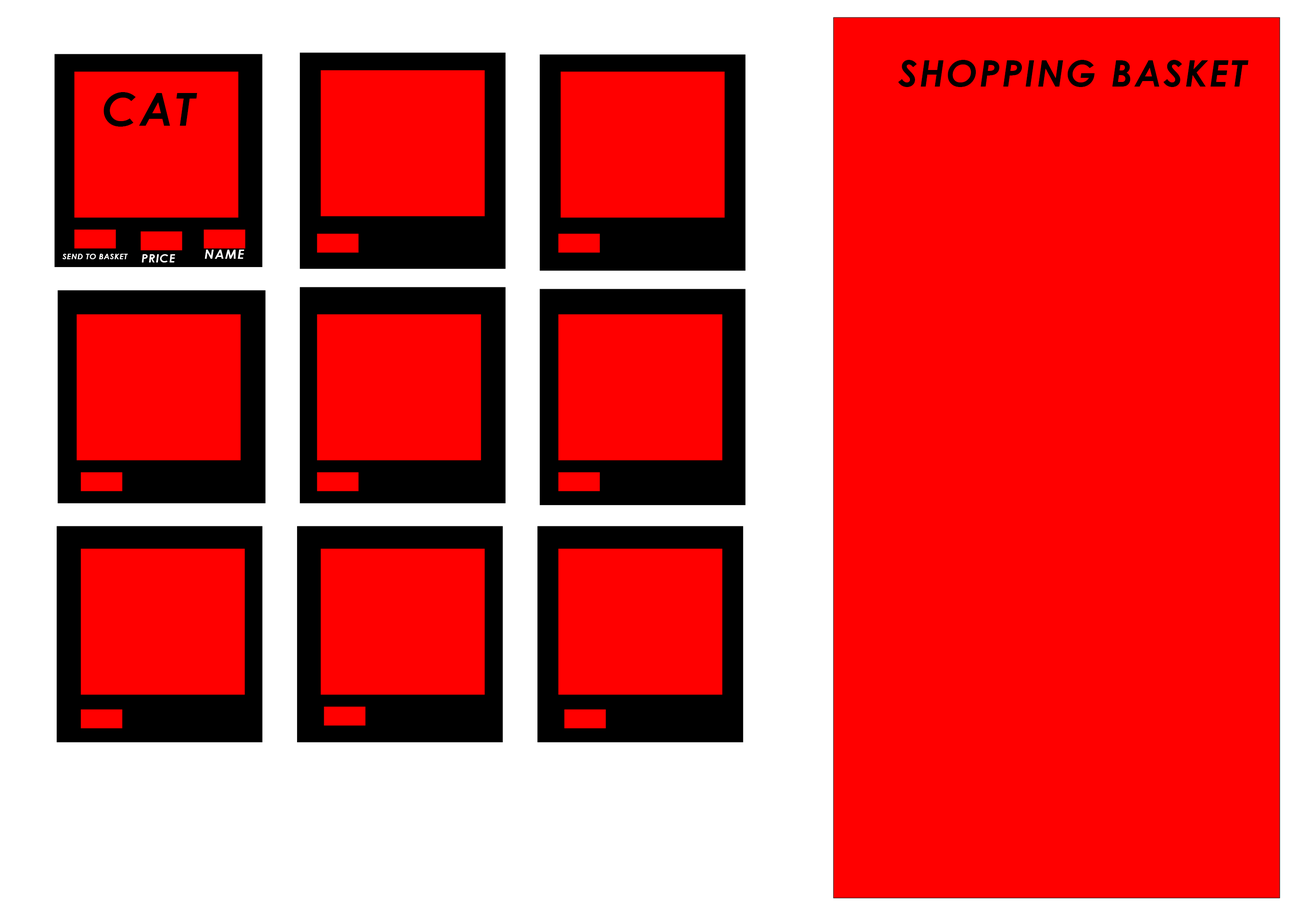
<style>
.page{position:relative;width:1294px;height:921px;background:#ff0000}
.page>*{position:absolute;margin:0}
.t1{font:37px "CenturyGothic-BoldItalic";letter-spacing:0.05em;color:#000000;text-transform:uppercase}
.t2{font:45.6px "CenturyGothic-BoldItalic";letter-spacing:0.05em;color:#000000;text-transform:uppercase}
.t3{font:7.8px "CenturyGothic-BoldItalic";letter-spacing:0.05em;color:#ffffff;text-transform:uppercase}
.t4{font:11.6px "CenturyGothic-BoldItalic";letter-spacing:0.05em;color:#ffffff;text-transform:uppercase}
.t5{font:13.1px "CenturyGothic-BoldItalic";letter-spacing:0.05em;color:#ffffff;text-transform:uppercase}
</style>
<div class="page">
<p class="t1" style="left:898px;top:60px;width:351px;height:27px">Shopping Basket</p>
<p class="t2" style="left:104px;top:92px;width:93px;height:35px">CAt</p>
<p class="t3" style="left:62px;top:254px;width:66px;height:5px">send to basket</p>
<p class="t4" style="left:142px;top:254px;width:33px;height:9px">price</p>
<p class="t5" style="left:205px;top:250px;width:40px;height:9px">Name</p>
</div>
